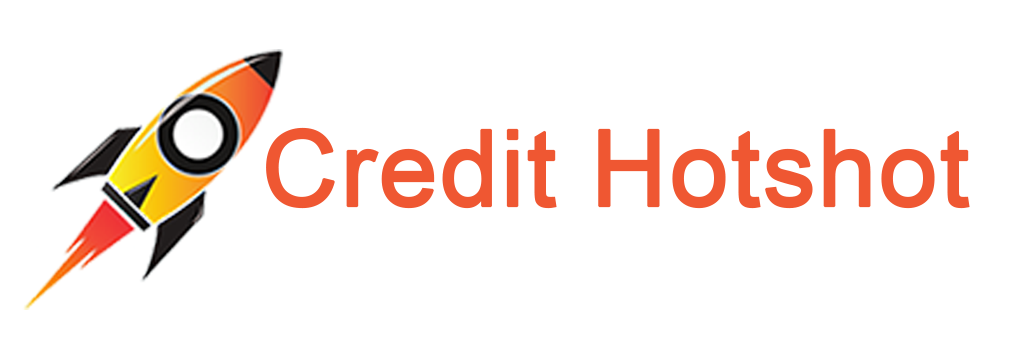
<style>
.page{position:relative;width:1024px;height:352px;background:#ffffff}
.page>*{position:absolute;margin:0}
.t1{font:105.9px "ArialMT";color:#ef5732;font-weight:bold}
</style>
<div class="page">
<p class="t1" style="left:266px;top:127px;width:704px;height:82px">Credit Hotshot</p>
</div>
